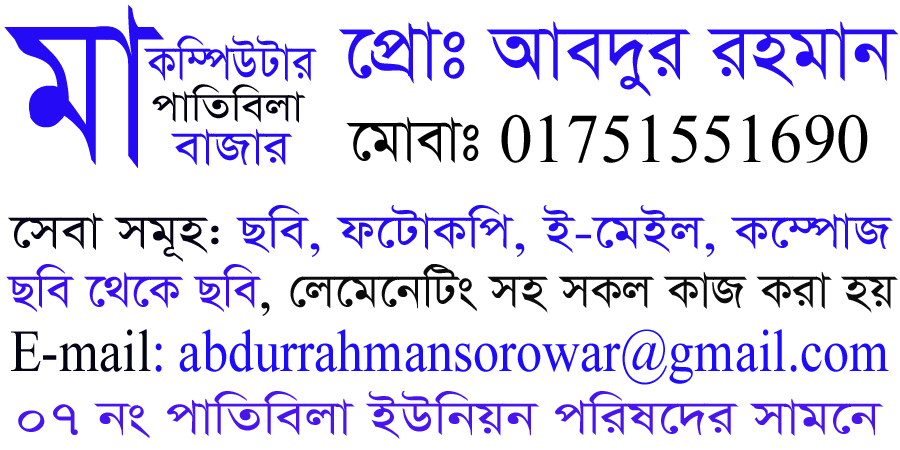
<style>
.page{position:relative;width:900px;height:450px;background:#ffffff}
.page>*{position:absolute;margin:0}
.t1{font:245.6px "SutonnyMJ";color:#250af6;scale:0.84 1}
.t2{font:90.7px "SutonnyMJ";color:#250af6}
.t3{font:57.7px "SutonnyMJ";color:#250af6;scale:0.91 1}
.t4{font:47.7px "SutonnyMJ";color:#03010f;scale:1.12 1}
.t5{font:69.8px "TimesNewRomanPSMT";color:#000000;scale:0.97 1}
.t6{font:69.8px "SutonnyMJ";color:#000000;scale:0.97 1}
.t7{font:55.8px "SutonnyMJ";color:#250af6;scale:1.11 1}
.t8{font:55.8px "SutonnyMJ";color:#050314;scale:1.11 1}
.t9{font:55.8px "SutonnyMJ";color:#0c0b0c;scale:1.03 1}
.t10{font:55.8px "SutonnyMJ";color:#370bf6;scale:1.03 1}
.t11{font:59.7px "TimesNewRomanPSMT";color:#1c0bfd;scale:0.87 1}
.t12{font:59.7px "TimesNewRomanPSMT";color:#040314;scale:0.87 1}
.t13{font:55.8px "SutonnyMJ";color:#4815ee;scale:1.17 1}
</style>
<div class="page">
<p class="t1" style="left:4px;top:4px;width:160px;height:165px">gv</p>
<p class="t2" style="left:339px;top:21px;width:560px;height:76px">‡cÖvt Ave`yi ingvb</p>
<p class="t3" style="left:143px;top:35px;width:174px;height:47px">Kw¤úDUvi</p>
<p class="t4" style="left:152px;top:84px;width:154px;height:39px">cvwZwejv</p>
<p class="t5" style="left:346px;top:114px;width:522px;height:49px"><span class="t6">‡gvevt </span>01751551690</p>
<p class="t7" style="left:170px;top:128px;width:123px;height:38px">evRvi</p>
<p class="t7" style="left:8px;top:205px;width:885px;height:57px"><span class="t8">‡mev mg~n:</span> Qwe, d‡UvKwc, B-‡gBj, K‡¤úvR</p>
<p class="t9" style="left:6px;top:264px;width:892px;height:52px"><span class="t10">Qwe ‡_‡K Qwe</span>, †j‡g‡bwUs mn mKj KvR Kiv nq</p>
<p class="t11" style="left:11px;top:329px;width:878px;height:56px"><span class="t12">E-mail</span>: abdurrahmansorowar@gmail.com</p>
<p class="t13" style="left:18px;top:391px;width:865px;height:48px">07 bs cvwZwejv BDwbqb cwil‡`i mvg‡b</p>
</div>
